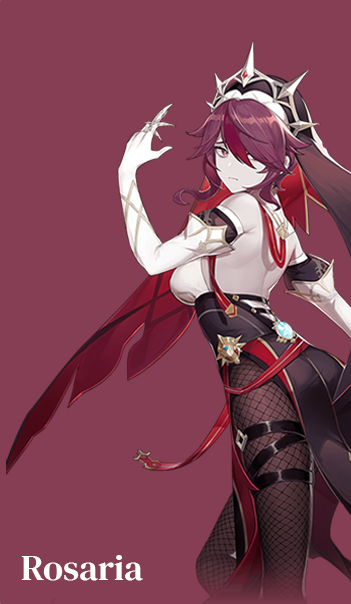
<style>
.page{position:relative;width:351px;height:604px;background:#853e53}
.page>*{position:absolute;margin:0}
.t1{font:37px "DMSerifText-Regular";color:#ffffff}
</style>
<div class="page">
<p class="t1" style="left:21px;top:555px;width:122px;height:26px">Rosaria</p>
</div>
